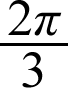
<style>
.page{position:relative;width:68px;height:88px;background:#ffffff}
.page>*{position:absolute;margin:0}
.t1{font:51.9px "TimesNewRomanPSMT";color:#000000}
.t2{font:51.9px "TimesNewRomanPS-ItalicMT";color:#000000}
</style>
<div class="page">
<p class="t1" style="left:8px;top:0px;width:54px;height:36px">2<span class="t2">π</span></p>
<p class="t1" style="left:22px;top:52px;width:21px;height:36px">3</p>
</div>
